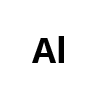
<style>
.page{position:relative;width:100px;height:100px;background:#ffffff}
.page>*{position:absolute;margin:0}
.t1{font:35px "OpenSans-Bold";color:#000000}
</style>
<div class="page">
<p class="t1" style="left:32px;top:36px;width:32px;height:27px">Al</p>
</div>
